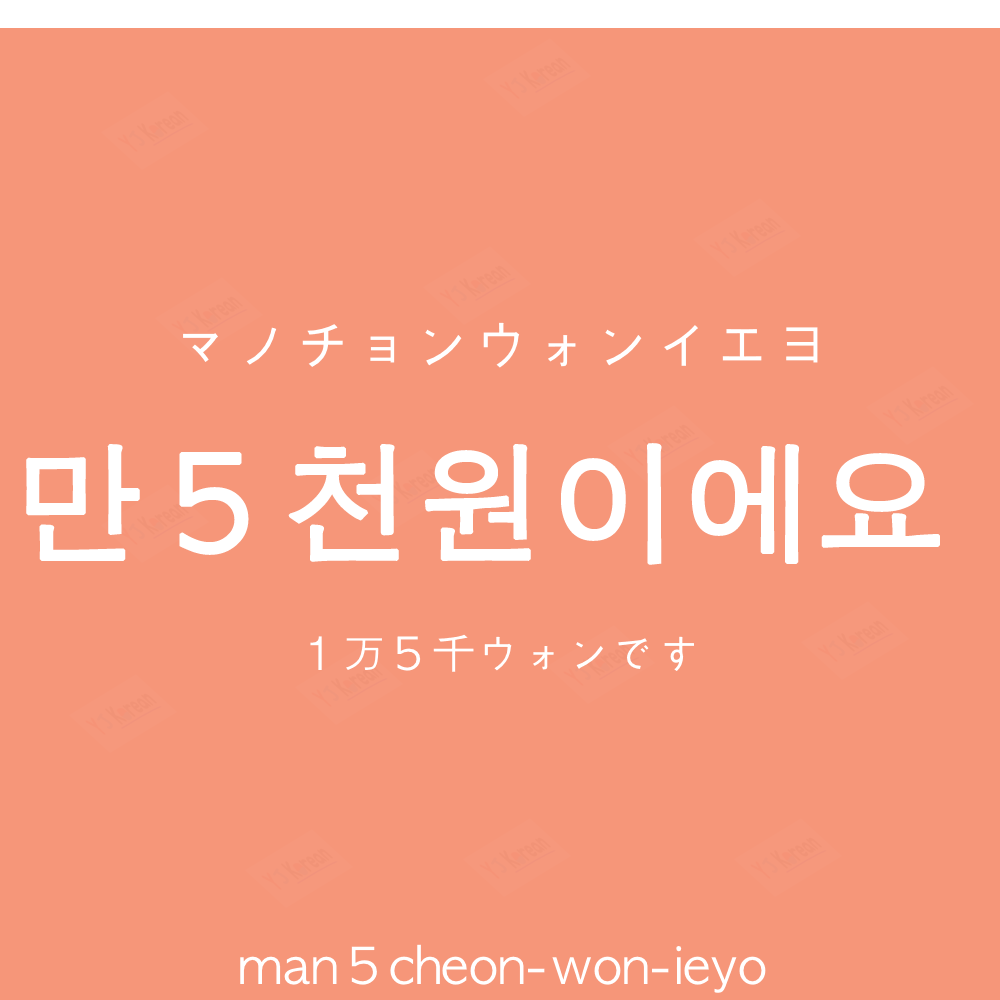
<style>
.page{position:relative;width:1000px;height:1000px;background:#f69679}
.page>*{position:absolute;margin:0}
.t1{font:60px "AppleGothic";color:#ffffff}
.t2{font:130px "AppleGothic";color:#ffffff;font-weight:bold}
.t3{font:45px "AppleGothic";color:#ffffff}
.t4{font:50px "AppleGothic";color:#ffffff}
</style>
<div class="page">
<p class="t1" style="left:183px;top:322px;width:635px;height:46px">マノチョンウォンイエヨ</p>
<p class="t2" style="left:26px;top:443px;width:914px;height:122px">만５천원이에요</p>
<p class="t3" style="left:310px;top:634px;width:384px;height:38px">１万５千ウォンです</p>
<p class="t4" style="left:240px;top:944px;width:526px;height:49px">man５cheon-won-ieyo</p>
</div>
